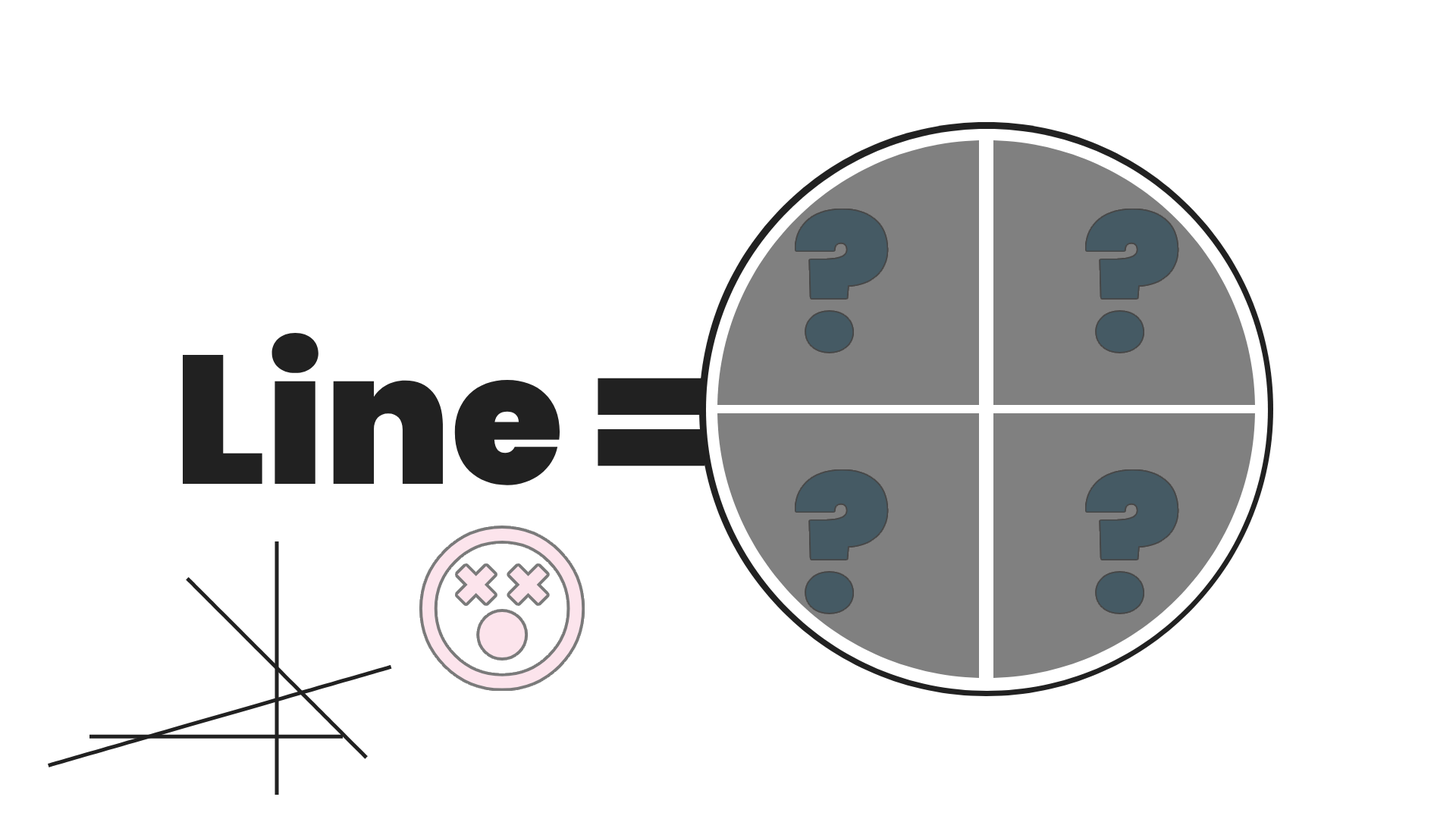
<style>
.page{position:relative;width:1456px;height:819px;background:#ffffff}
.page>*{position:absolute;margin:0}
.t1{font:182px "Poppins-Black";color:#455a64}
.t2{font:182px "Poppins-Black";color:#212121}
</style>
<div class="page">
<p class="t1" style="left:795px;top:209px;width:92px;height:143px">?</p>
<p class="t1" style="left:1086px;top:209px;width:92px;height:143px">?</p>
<p class="t2" style="left:183px;top:333px;width:522px;height:152px">Line =</p>
<p class="t1" style="left:795px;top:470px;width:92px;height:143px">?</p>
<p class="t1" style="left:1086px;top:470px;width:92px;height:143px">?</p>
</div>
